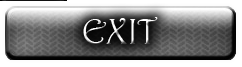
<style>
.page{position:relative;width:242px;height:67px}
.page>*{position:absolute;margin:0}
.t1{font:36px "Harrington"}
</style>
<div class="page">
<p class="t1" style="left:83px;top:17px;width:75px;height:27px">EXIT</p>
</div>
